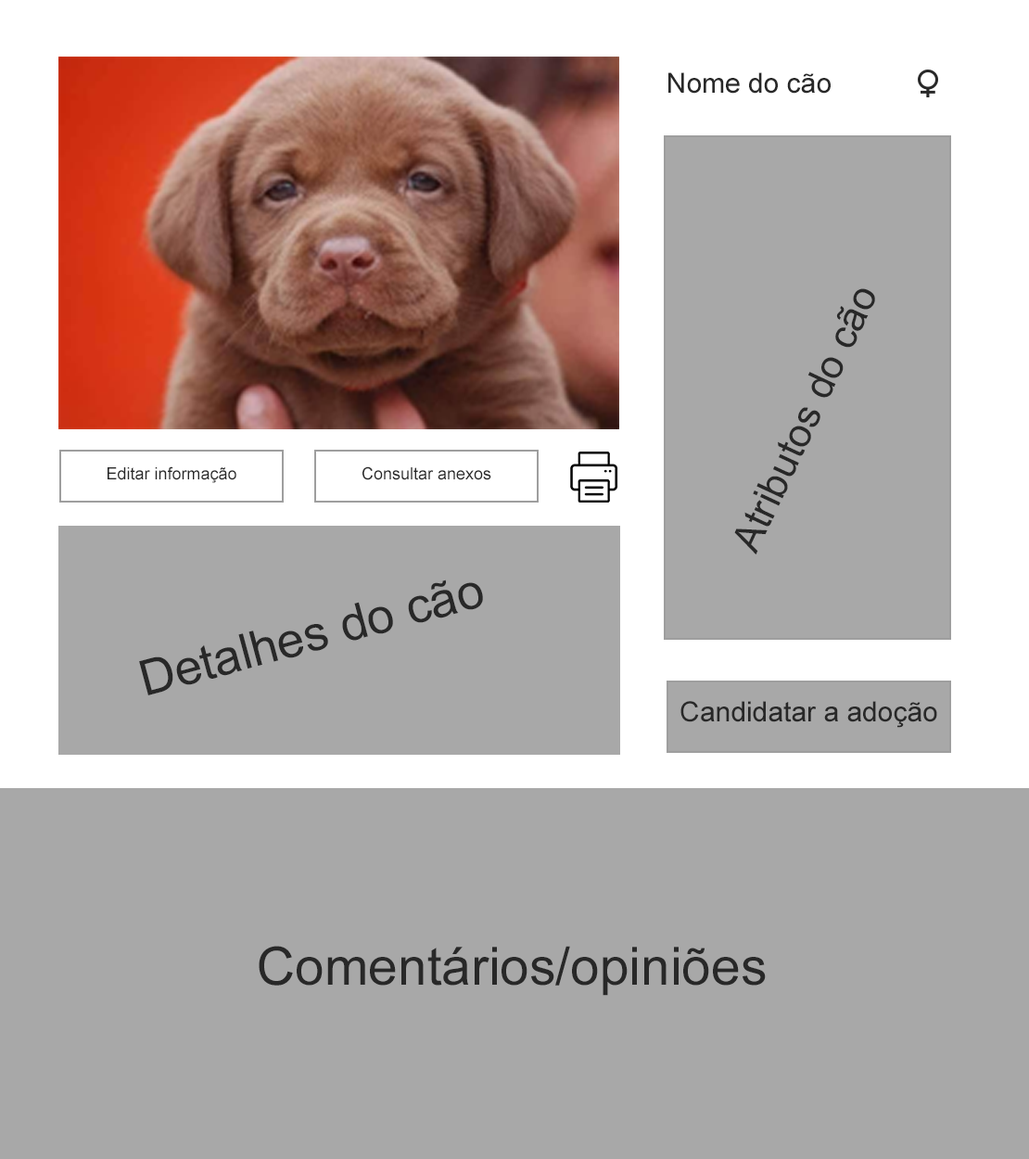
<style>
.page{position:relative;width:1029px;height:1159px;background:#a8a8a8}
.page>*{position:absolute;margin:0}
.t1{font:27.8px "ArialMT";color:#282828}
.t2{font:40px "ArialMT";color:#282828}
.t3{font:16.7px "ArialMT";color:#282828}
.t4{font:49.1px "ArialMT";color:#282828}
.t5{font:52.7px "ArialMT";color:#282828}
</style>
<div class="page">
<p class="t1" style="left:668px;top:72px;width:163px;height:22px">Nome do cão</p>
<p class="t2" style="left:734px;top:288px;width:141px;height:266px;rotate:-65deg">Atributos do cão</p>
<p class="t3" style="left:108px;top:466px;width:128px;height:17px">Editar informação</p>
<p class="t3" style="left:362px;top:466px;width:129px;height:14px">Consultar anexos</p>
<p class="t4" style="left:139px;top:579px;width:344px;height:116px;rotate:-15deg">Detalhes do cão</p>
<p class="t1" style="left:680px;top:701px;width:257px;height:27px">Candidatar a adoção</p>
<p class="t5" style="left:259px;top:946px;width:507px;height:50px">Comentários/opiniões</p>
</div>
